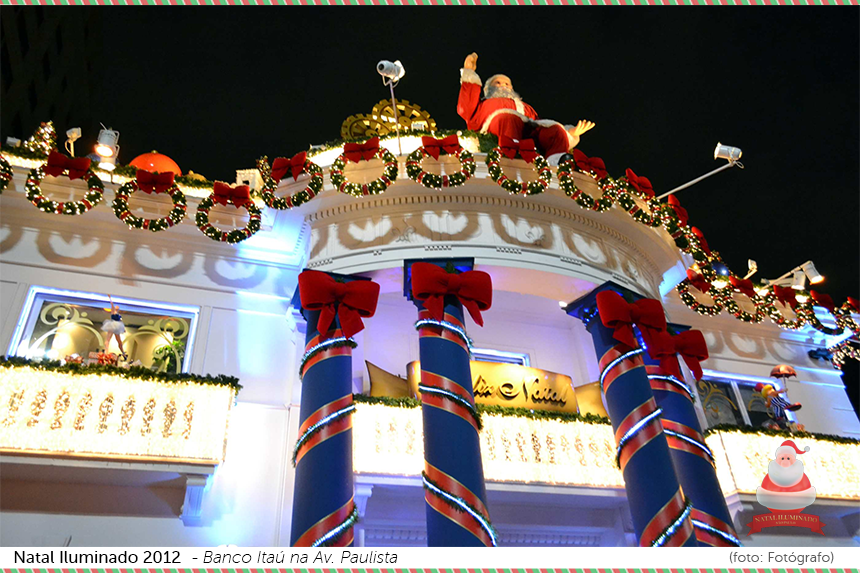
<style>
.page{position:relative;width:860px;height:573px}
.page>*{position:absolute;margin:0}
.t1{font:17px "MuseoSans-500";color:#000000}
.t2{font:17px "MuseoSans-100Italic";color:#000000}
.t3{font:14px "MuseoSans-300";color:#5c5c5c}
</style>
<div class="page">
<p class="t1" style="left:14px;top:551px;width:167px;height:12px">Natal Iluminado 2012</p>
<p class="t2" style="left:192px;top:551px;width:206px;height:12px">- Banco Itaú na Av. Paulista</p>
<p class="t3" style="left:729px;top:551px;width:105px;height:14px">(foto: Fotógrafo)</p>
</div>
